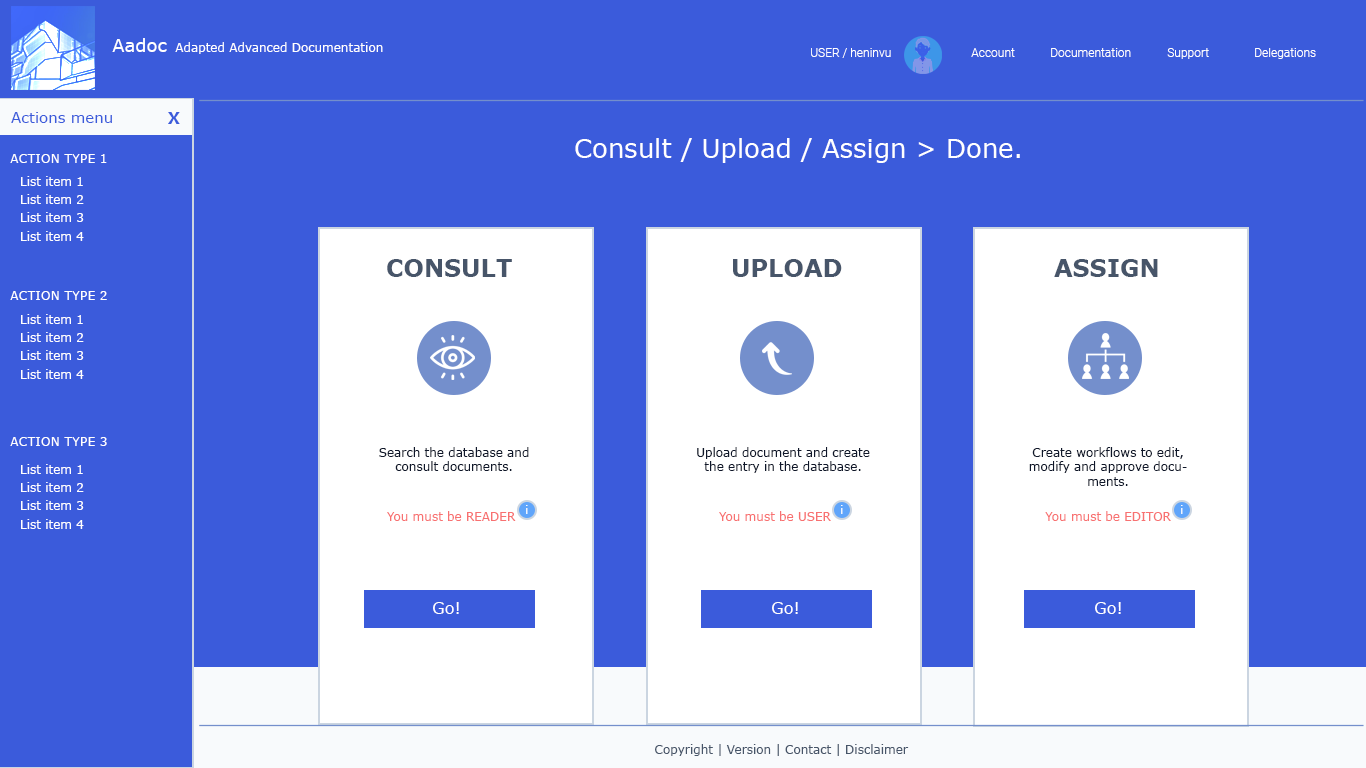
<style>
.page{position:relative;width:1366px;height:768px;background:#3b5bdb}
.page>*{position:absolute;margin:0}
.t1{font:18px "Verdana";color:#ffffff}
.t2{font:12px "Verdana";color:#ffffff}
.t3{font:12px "Roboto-Light";color:#ffffff}
.t4{font:15px "Verdana";color:#3b5bdb}
.t5{font:16px "Verdana-Bold";color:#3b5bdb;text-transform:uppercase}
.t6{font:26px "Verdana";color:#ffffff}
.t7{font:12px "Verdana";color:#ffffff;text-transform:uppercase}
.t8{font:24px "Verdana-Bold";color:#475569}
.t9{font:12px "Verdana";color:#0f172a}
.t10{font:11px "Verdana";color:#ffffff}
.t11{font:12px "Verdana";color:#f87171}
.t12{font:16px "Verdana";color:#ffffff}
.t13{font:12px "Verdana";color:#475569}
</style>
<div class="page">
<p class="t1" style="left:112px;top:38px;width:55px;height:14px">Aadoc</p>
<p class="t2" style="left:175px;top:42px;width:208px;height:12px">Adapted Advanced Documentation</p>
<p class="t3" style="left:811px;top:48px;width:80px;height:10px">USER / heninvu</p>
<p class="t3" style="left:971px;top:48px;width:44px;height:9px">Account</p>
<p class="t3" style="left:1051px;top:48px;width:80px;height:9px">Documentation</p>
<p class="t3" style="left:1167px;top:48px;width:42px;height:11px">Support</p>
<p class="t3" style="left:1255px;top:48px;width:61px;height:11px">Delegations</p>
<p class="t4" style="left:11px;top:112px;width:101px;height:11px">Actions menu</p>
<p class="t5" style="left:168px;top:112px;width:12px;height:12px">X</p>
<p class="t6" style="left:575px;top:138px;width:445px;height:25px">Consult / Upload / Assign &gt; Done.</p>
<p class="t7" style="left:10px;top:154px;width:97px;height:9px">Action type 1</p>
<p class="t2" style="left:21px;top:176px;width:62px;height:10px">List item 1</p>
<p class="t2" style="left:21px;top:194px;width:63px;height:10px">List item 2</p>
<p class="t2" style="left:21px;top:212px;width:63px;height:10px">List item 3</p>
<p class="t2" style="left:21px;top:231px;width:63px;height:10px">List item 4</p>
<p class="t8" style="left:387px;top:259px;width:125px;height:18px">CONSULT</p>
<p class="t8" style="left:733px;top:259px;width:109px;height:18px">UPLOAD</p>
<p class="t8" style="left:1054px;top:259px;width:104px;height:18px">ASSIGN</p>
<p class="t7" style="left:10px;top:291px;width:97px;height:9px">Action type 2</p>
<p class="t2" style="left:21px;top:314px;width:62px;height:10px">List item 1</p>
<p class="t2" style="left:21px;top:332px;width:63px;height:10px">List item 2</p>
<p class="t2" style="left:21px;top:350px;width:63px;height:10px">List item 3</p>
<p class="t2" style="left:21px;top:369px;width:63px;height:10px">List item 4</p>
<p class="t7" style="left:10px;top:437px;width:97px;height:9px">Action type 3</p>
<p class="t9" style="left:379px;top:447px;width:150px;height:24px;text-align:center">Search the database and consult documents.</p>
<p class="t9" style="left:697px;top:447px;width:173px;height:26px;text-align:center">Upload document and create the entry in the database.</p>
<p class="t9" style="left:1029px;top:447px;width:158px;height:39px;text-align:center">Create workflows to edit, modify and approve documents.</p>
<p class="t2" style="left:21px;top:464px;width:62px;height:10px">List item 1</p>
<p class="t2" style="left:21px;top:482px;width:63px;height:10px">List item 2</p>
<p class="t2" style="left:21px;top:500px;width:63px;height:10px">List item 3</p>
<p class="t10" style="left:526px;top:505px;width:2px;height:9px">i</p>
<p class="t10" style="left:841px;top:505px;width:2px;height:9px">i</p>
<p class="t10" style="left:1181px;top:505px;width:2px;height:9px">i</p>
<p class="t2" style="left:21px;top:519px;width:63px;height:10px">List item 4</p>
<p class="t11" style="left:387px;top:511px;width:129px;height:10px">You must be READER</p>
<p class="t11" style="left:719px;top:511px;width:112px;height:10px">You must be USER</p>
<p class="t11" style="left:1045px;top:511px;width:126px;height:10px">You must be EDITOR</p>
<p class="t12" style="left:433px;top:602px;width:26px;height:12px">Go!</p>
<p class="t12" style="left:772px;top:602px;width:26px;height:12px">Go!</p>
<p class="t12" style="left:1095px;top:602px;width:26px;height:12px">Go!</p>
<p class="t13" style="left:655px;top:744px;width:254px;height:12px">Copyright | Version | Contact | Disclaimer</p>
</div>
